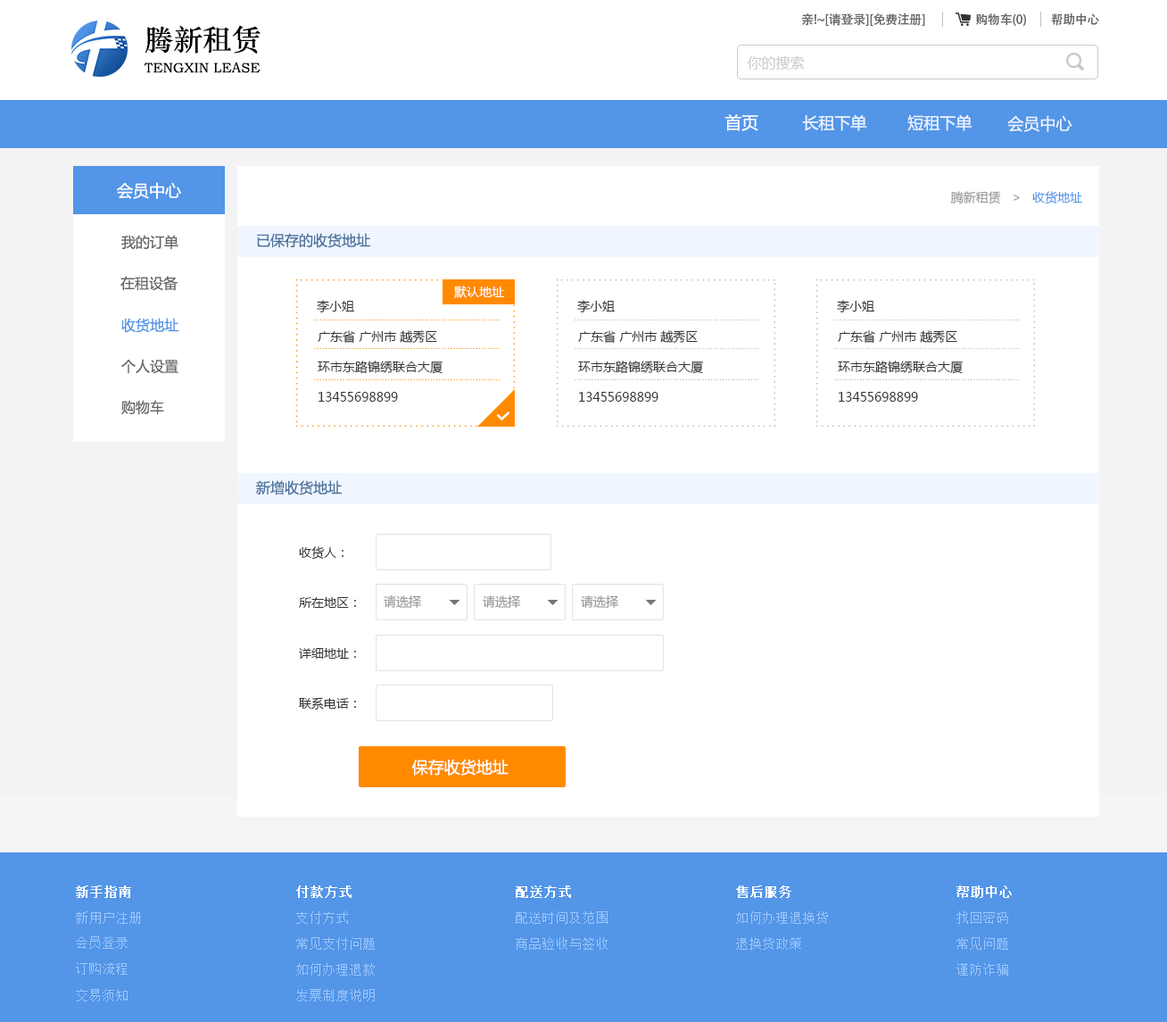
<style>
.page{position:relative;width:1167px;height:1022px;background:#ffffff}
.page>*{position:absolute;margin:0}
.t1{font:12.5px "AdobeHeitiStd-Regular";letter-spacing:-0.02em;color:#666666}
.t2{font:29.1px "STZhongsong";color:#000000}
.t3{font:13.8px "STZhongsong";color:#000000}
.t4{font:14.3px "MicrosoftYaHei";color:#c9caca}
.t5{font:16.7px "MicrosoftYaHei";color:#ffffff}
.t6{font:16.1px "MicrosoftYaHei";color:#eaf3ff}
.t7{font:16.1px "MicrosoftYaHei";color:#fefefe}
.t8{font:12.5px "MicrosoftYaHei";color:#999999}
.t9{font:12.5px "MicrosoftYaHei";color:#5395e7}
.t10{font:14.3px "MicrosoftYaHei";color:#4d719d}
.t11{font:14.3px "MicrosoftYaHei";color:#666666}
.t12{font:12.5px "MicrosoftYaHei";color:#ffffff}
.t13{font:12.5px "MicrosoftYaHei";color:#333333}
.t14{font:14.3px "MicrosoftYaHei";color:#5395e7}
.t15{font:16.1px "MicrosoftYaHei";color:#fffefe}
.t16{font:13.4px "SimSun";color:#ffffff;font-weight:bold}
.t17{font:13.4px "SimSun";color:#9ec8fd}
</style>
<div class="page">
<p class="t1" style="left:802px;top:12px;width:123px;height:14px">亲!~[请登录][免费注册]</p>
<p class="t1" style="left:976px;top:12px;width:50px;height:14px">购物车(0)</p>
<p class="t1" style="left:1051px;top:13px;width:48px;height:13px">帮助中心</p>
<p class="t2" style="left:145px;top:25px;width:116px;height:29px">腾新租赁</p>
<p class="t3" style="left:144px;top:62px;width:117px;height:11px">TENGXIN LEASE</p>
<p class="t4" style="left:747px;top:55px;width:58px;height:15px">你的搜索</p>
<p class="t5" style="left:725px;top:114px;width:33px;height:17px">首页</p>
<p class="t6" style="left:802px;top:114px;width:65px;height:17px">长租下单</p>
<p class="t6" style="left:907px;top:114px;width:66px;height:17px">短租下单</p>
<p class="t6" style="left:1007px;top:115px;width:66px;height:17px">会员中心</p>
<p class="t7" style="left:117px;top:182px;width:64px;height:17px">会员中心</p>
<p class="t8" style="left:950px;top:191px;width:132px;height:13px">腾新租赁   &gt;   <span class="t9">收货地址</span></p>
<p class="t10" style="left:257px;top:233px;width:113px;height:15px">已保存的收货地址</p>
<p class="t11" style="left:121px;top:235px;width:57px;height:15px">我的订单</p>
<p class="t11" style="left:120px;top:276px;width:58px;height:15px">在租设备</p>
<p class="t12" style="left:454px;top:286px;width:50px;height:12px">默认地址</p>
<p class="t13" style="left:317px;top:300px;width:37px;height:12px">李小姐</p>
<p class="t13" style="left:577px;top:300px;width:38px;height:12px">李小姐</p>
<p class="t13" style="left:837px;top:300px;width:37px;height:12px">李小姐</p>
<p class="t14" style="left:121px;top:318px;width:57px;height:15px">收货地址</p>
<p class="t13" style="left:318px;top:330px;width:119px;height:14px">广东省 广州市 越秀区</p>
<p class="t13" style="left:578px;top:330px;width:120px;height:14px">广东省 广州市 越秀区</p>
<p class="t13" style="left:838px;top:330px;width:119px;height:14px">广东省 广州市 越秀区</p>
<p class="t11" style="left:121px;top:359px;width:57px;height:15px">个人设置</p>
<p class="t13" style="left:318px;top:360px;width:125px;height:14px">环市东路锦绣联合大厦</p>
<p class="t13" style="left:578px;top:360px;width:125px;height:14px">环市东路锦绣联合大厦</p>
<p class="t13" style="left:838px;top:360px;width:125px;height:14px">环市东路锦绣联合大厦</p>
<p class="t11" style="left:121px;top:400px;width:43px;height:15px">购物车</p>
<p class="t13" style="left:319px;top:392px;width:79px;height:10px">13455698899</p>
<p class="t13" style="left:579px;top:392px;width:80px;height:10px">13455698899</p>
<p class="t13" style="left:839px;top:392px;width:79px;height:10px">13455698899</p>
<p class="t10" style="left:256px;top:480px;width:86px;height:15px">新增收货地址</p>
<p class="t13" style="left:299px;top:546px;width:45px;height:13px">收货人：</p>
<p class="t13" style="left:299px;top:597px;width:57px;height:11px">所在地区：</p>
<p class="t8" style="left:384px;top:595px;width:38px;height:13px">请选择</p>
<p class="t8" style="left:483px;top:595px;width:38px;height:13px">请选择</p>
<p class="t8" style="left:581px;top:595px;width:38px;height:13px">请选择</p>
<p class="t13" style="left:299px;top:648px;width:57px;height:11px">详细地址：</p>
<p class="t13" style="left:299px;top:697px;width:57px;height:12px">联系电话：</p>
<p class="t15" style="left:411px;top:758px;width:98px;height:17px">保存收货地址</p>
<p class="t16" style="left:76px;top:885px;width:55px;height:13px">新手指南</p>
<p class="t16" style="left:296px;top:885px;width:56px;height:13px">付款方式</p>
<p class="t16" style="left:516px;top:885px;width:55px;height:13px">配送方式</p>
<p class="t16" style="left:736px;top:885px;width:55px;height:13px">售后服务</p>
<p class="t16" style="left:957px;top:885px;width:55px;height:13px">帮助中心</p>
<p class="t17" style="left:76px;top:911px;width:65px;height:13px">新用户注册</p>
<p class="t17" style="left:296px;top:911px;width:52px;height:13px">支付方式</p>
<p class="t17" style="left:516px;top:911px;width:92px;height:13px">配送时间及范围</p>
<p class="t17" style="left:736px;top:911px;width:92px;height:13px">如何办理退换货</p>
<p class="t17" style="left:957px;top:911px;width:51px;height:13px">找回密码</p>
<p class="t17" style="left:76px;top:936px;width:52px;height:13px">会员登录</p>
<p class="t17" style="left:296px;top:937px;width:79px;height:12px">常见支付问题</p>
<p class="t17" style="left:516px;top:937px;width:92px;height:12px">商品验收与签收</p>
<p class="t17" style="left:736px;top:937px;width:65px;height:12px">退换货政策</p>
<p class="t17" style="left:957px;top:937px;width:51px;height:12px">常见问题</p>
<p class="t17" style="left:76px;top:962px;width:52px;height:12px">订购流程</p>
<p class="t17" style="left:296px;top:963px;width:79px;height:12px">如何办理退款</p>
<p class="t17" style="left:957px;top:963px;width:51px;height:12px">谨防诈骗</p>
<p class="t17" style="left:76px;top:989px;width:52px;height:12px">交易须知</p>
<p class="t17" style="left:296px;top:989px;width:79px;height:12px">发票制度说明</p>
</div>
